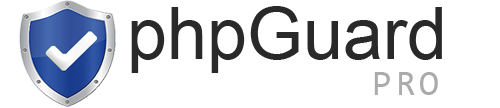
<style>
.page{position:relative;width:500px;height:108px;background:#ffffff}
.page>*{position:absolute;margin:0}
.t1{font:72px "ArialMT";color:#292929}
.t2{font:36px "Consolas";letter-spacing:0.1em;color:#adabab}
</style>
<div class="page">
<p class="t1" style="left:131px;top:6px;width:311px;height:67px">phpGuard</p>
<p class="t2" style="left:374px;top:72px;width:64px;height:23px">PRO</p>
</div>
